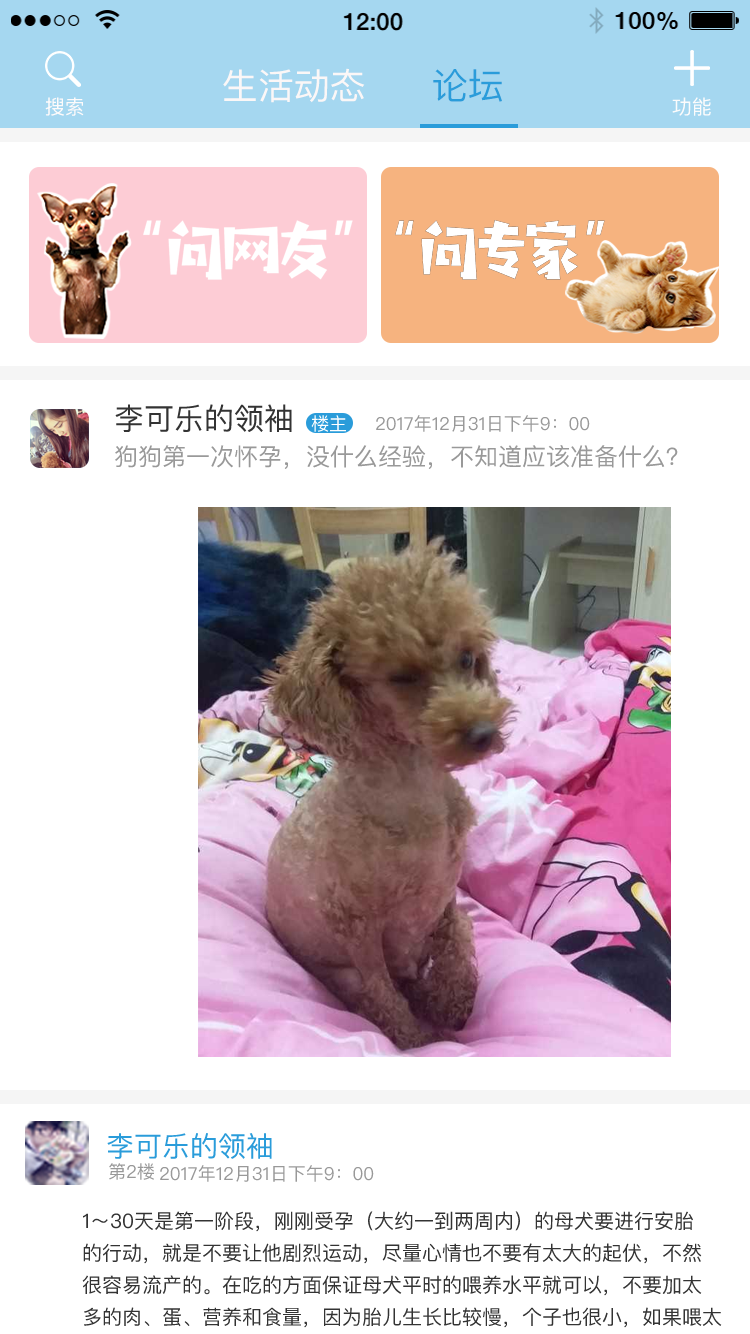
<style>
.page{position:relative;width:750px;height:1334px;background:#ffffff}
.page>*{position:absolute;margin:0}
.t1{font:36px "PingFangSC-Regular";color:#fbf7f7}
.t2{font:36px "PingFangSC-Regular";color:#2a9cda}
.t3{font:20px "PingFangSC-Regular";color:#fefbfb}
.t4{font:20px "PingFangSC-Regular";color:#fcfcfc}
.t5{font:30px "PingFangSC";color:#333333}
.t6{font:18px "PingFangSC";color:#ffffff}
.t7{font:18px "PingFangSC";color:#999999}
.t8{font:24px "PingFangSC";color:#999999}
.t9{font:28px "PingFangSC";color:#2a9cda}
.t10{font:20px/32px "PingFangSC";color:#333333}
</style>
<div class="page">
<p class="t1" style="left:223px;top:68px;width:142px;height:35px">生活动态</p>
<p class="t2" style="left:433px;top:69px;width:69px;height:33px">论坛</p>
<p class="t3" style="left:45px;top:97px;width:39px;height:19px">搜索</p>
<p class="t4" style="left:672px;top:97px;width:39px;height:19px">功能</p>
<p class="t5" style="left:115px;top:404px;width:177px;height:28px">李可乐的领袖</p>
<p class="t6" style="left:311px;top:415px;width:35px;height:17px">楼主</p>
<p class="t7" style="left:376px;top:415px;width:214px;height:17px">2017年12月31日下午9：00</p>
<p class="t8" style="left:115px;top:445px;width:563px;height:24px">狗狗第一次怀孕，没什么经验，不知道应该准备什么？</p>
<p class="t9" style="left:107px;top:1133px;width:165px;height:26px">李可乐的领袖</p>
<p class="t7" style="left:109px;top:1163px;width:45px;height:17px">第2楼</p>
<p class="t7" style="left:160px;top:1165px;width:214px;height:17px">2017年12月31日下午9：00</p>
<p class="t10" style="left:82px;top:1211px;width:640px;height:117px">1～30天是第一阶段，刚刚受孕（大约一到两周内）的母犬要进行安胎<br>的行动，就是不要让他剧烈运动，尽量心情也不要有太大的起伏，不然<br>很容易流产的。在吃的方面保证母犬平时的喂养水平就可以，不要加太<br>多的肉、蛋、营养和食量，因为胎儿生长比较慢，个子也很小，如果喂太</p>
</div>
